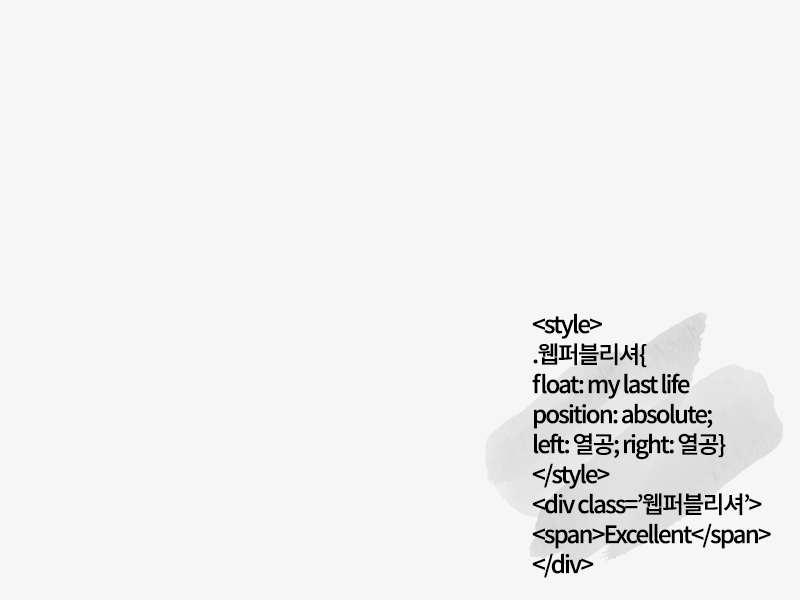
<style>
.page{position:relative;width:800px;height:600px;background:#f6f6f6}
.page>*{position:absolute;margin:0}
.t1{font:24px/30px "NotoSansKR-Medium";letter-spacing:-0.075em;color:#000000}
</style>
<div class="page">
<p class="t1" style="left:532px;top:313px;width:239px;height:265px">&lt;style&gt;<br>.웹퍼블리셔{<br>float: my last life<br>position: absolute; <br>left: 열공; right: 열공}<br>&lt;/style&gt;<br>&lt;div class=’웹퍼블리셔’&gt;<br>&lt;span&gt;Excellent&lt;/span&gt;<br>&lt;/div&gt;</p>
</div>
